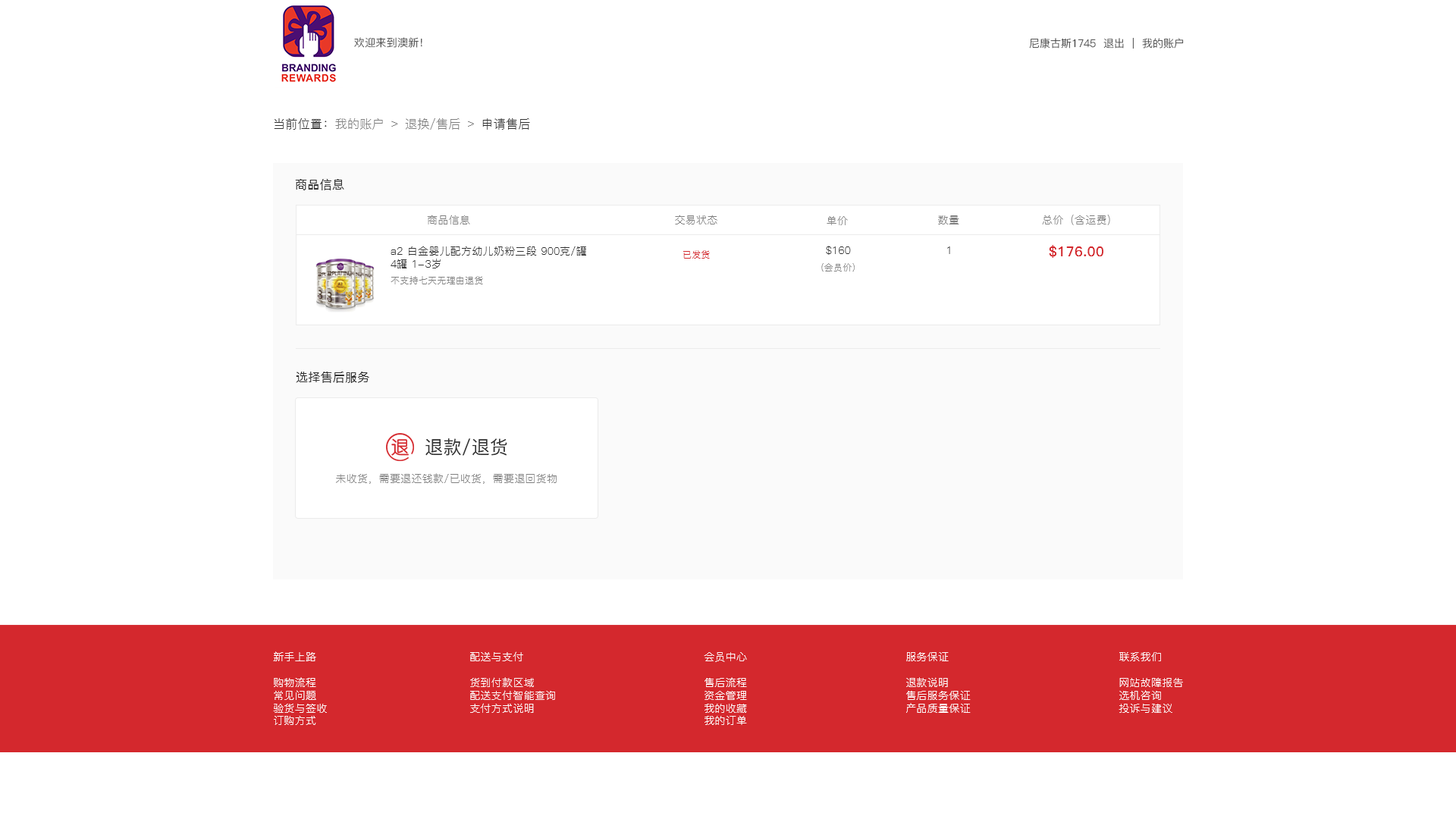
<style>
.page{position:relative;width:1456px;height:819px;background:#ffffff}
.page>*{position:absolute;margin:0}
.t1{font:10.6px "PingFang-SC-Regular";letter-spacing:0.02em}
.t2{font:10.6px "PingFang-SC-Regular";color:#333333}
.t3{font:12.1px "PingFang-SC-Regular";letter-spacing:0.02em;color:#808080}
.t4{font:12.1px "PingFang-SC-Regular";letter-spacing:0.02em;color:#333333}
.t5{font:12.1px "PingFang-SC-Medium";letter-spacing:0.02em;color:#333333}
.t6{font:10.6px "PingFang-SC-Regular";letter-spacing:0.02em;color:#808080}
.t7{font:10.6px "PingFang-SC-Regular";letter-spacing:0.02em;color:#333333}
.t8{font:13.6px "PingFang-SC-Bold";letter-spacing:0.02em;color:#d4282d}
.t9{font:9.1px "PingFang-SC-Regular";letter-spacing:0.02em;color:#d4282d}
.t10{font:9.1px "PingFang-SC-Regular";letter-spacing:0.02em;color:#808080}
.t11{font:18.2px "PingFang-SC-Medium";letter-spacing:0.02em;color:#333333}
.t12{font:10.6px "PingFang-SC-Regular";letter-spacing:0.02em;color:#fffefe}
</style>
<div class="page">
<p class="t1" style="left:354px;top:37px;width:68px;height:11px">欢迎来到澳新！</p>
<p class="t2" style="left:1029px;top:37px;width:155px;height:12px">尼康古斯1745  退出  |  我的账户</p>
<p class="t3" style="left:274px;top:118px;width:256px;height:12px"><span class="t4">当前位置：</span>我的账户 ﹥ 退换/售后 ﹥<span class="t4"> 申请售后</span></p>
<p class="t5" style="left:295px;top:179px;width:49px;height:11px">商品信息</p>
<p class="t6" style="left:427px;top:215px;width:43px;height:9px">商品信息</p>
<p class="t6" style="left:675px;top:215px;width:42px;height:9px">交易状态</p>
<p class="t6" style="left:827px;top:216px;width:21px;height:9px">单价</p>
<p class="t6" style="left:938px;top:215px;width:21px;height:9px">数量</p>
<p class="t6" style="left:1042px;top:215px;width:68px;height:10px">总价（含运费）</p>
<p class="t7" style="left:826px;top:246px;width:25px;height:9px">$160</p>
<p class="t8" style="left:1049px;top:245px;width:54px;height:13px">$176.00</p>
<p class="t7" style="left:391px;top:246px;width:195px;height:22px">a2 白金婴儿配方幼儿奶粉三段 900克/罐 <br>4罐 1-3岁</p>
<p class="t9" style="left:683px;top:250px;width:27px;height:9px">已发货</p>
<p class="t7" style="left:947px;top:246px;width:3px;height:8px">1</p>
<p class="t10" style="left:821px;top:263px;width:34px;height:8px">(会员价)</p>
<p class="t10" style="left:391px;top:276px;width:92px;height:8px">不支持七天无理由退货</p>
<p class="t5" style="left:296px;top:372px;width:73px;height:11px">选择售后服务</p>
<p class="t11" style="left:425px;top:438px;width:82px;height:18px">退款/退货</p>
<p class="t6" style="left:336px;top:473px;width:221px;height:11px">未收货，需要退还钱款/已收货，需要退回货物</p>
<p class="t12" style="left:273px;top:651px;width:54px;height:74px">新手上路<br><br>购物流程<br>常见问题<br>验货与签收<br>订购方式</p>
<p class="t12" style="left:470px;top:651px;width:85px;height:62px">配送与支付<br><br>货到付款区域<br>配送支付智能查询<br>支付方式说明</p>
<p class="t12" style="left:704px;top:652px;width:43px;height:73px">会员中心<br><br>售后流程<br>资金管理<br>我的收藏<br>我的订单</p>
<p class="t12" style="left:906px;top:652px;width:65px;height:61px">服务保证<br><br>退款说明<br>售后服务保证<br>产品质量保证</p>
<p class="t12" style="left:1119px;top:652px;width:64px;height:61px">联系我们<br><br>网站故障报告<br>选机咨询<br>投诉与建议</p>
</div>
